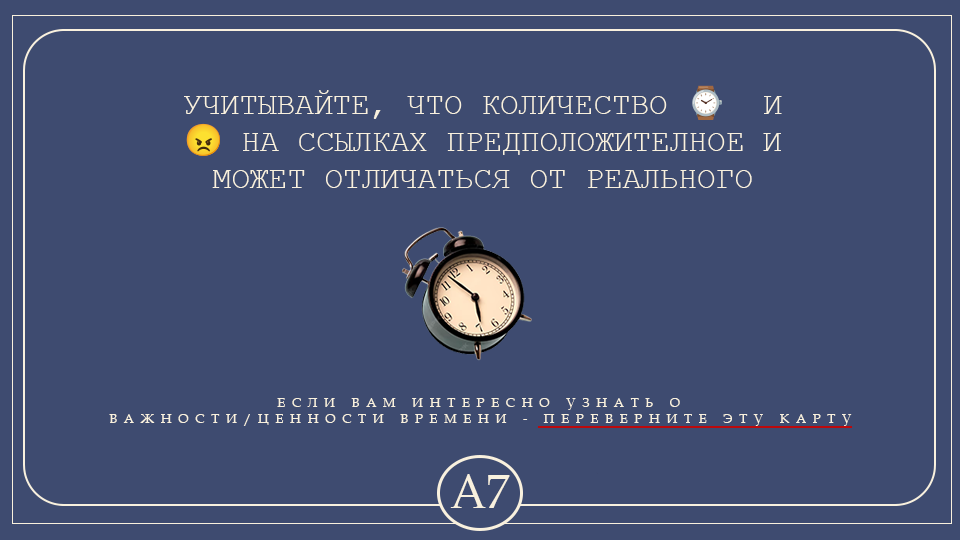
<style>
.page{position:relative;width:960px;height:540px;background:#3e4b70}
.page>*{position:absolute;margin:0}
.t1{font:31px "CourierNewPSMT";color:#f9f1de;text-transform:uppercase}
.t2{font:31px "NotoColorEmoji-SVG";color:#cf0000}
.t3{font:31px "NotoColorEmoji-SVG";color:#f9f1de;text-transform:uppercase}
.t4{font:13.2px "BookAntiqua";letter-spacing:0.5em;color:#f9f1de;text-transform:uppercase}
.t5{font:46.6px "BookAntiqua";color:#f9f1de}
</style>
<div class="page">
<p class="t1" style="left:184px;top:85px;width:598px;height:103px;text-align:center">Учитывайте, что количество <span class="t2">⌚ </span>и  <span class="t3">😠</span> на ссылках предположителное и может отличаться от реального</p>
<p class="t4" style="left:109px;top:398px;width:743px;height:28px;text-align:center">Если вам интересно узнать о <br>важности/ценности времени - переверните эту карту</p>
<p class="t5" style="left:450px;top:474px;width:60px;height:34px">A7</p>
</div>
